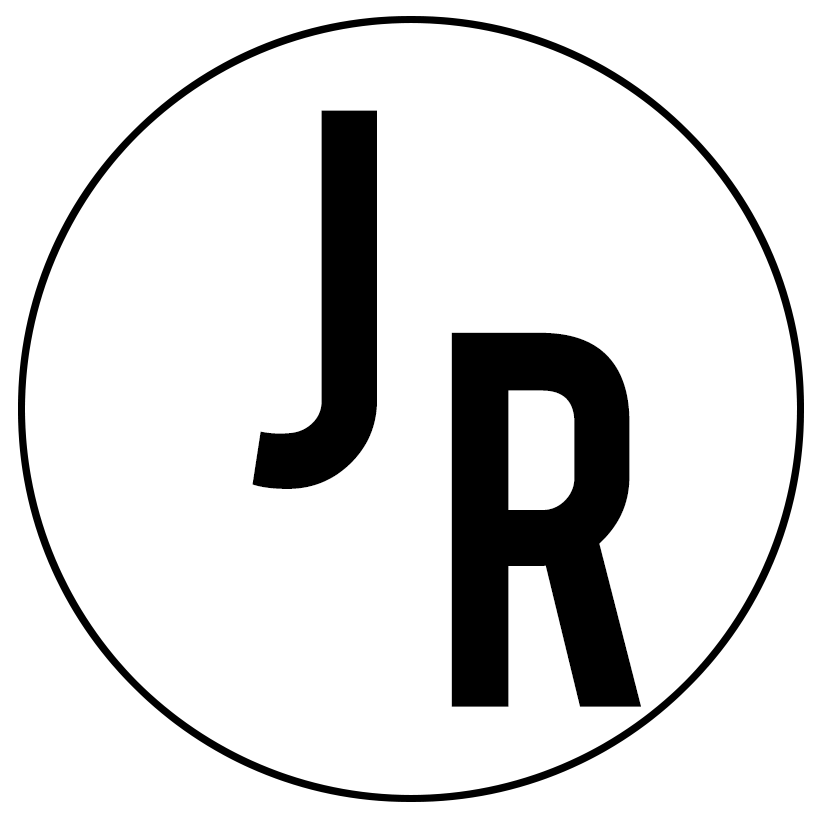
<style>
.page{position:relative;width:819px;height:819px;background:#ffffff}
.page>*{position:absolute;margin:0}
.t1{font:420.8px "Bebas";color:#000000}
.t2{font:420px "Bebas";color:#000000}
</style>
<div class="page">
<p class="t1" style="left:252px;top:110px;width:125px;height:379px">J</p>
<p class="t2" style="left:451px;top:332px;width:190px;height:375px">R</p>
</div>
